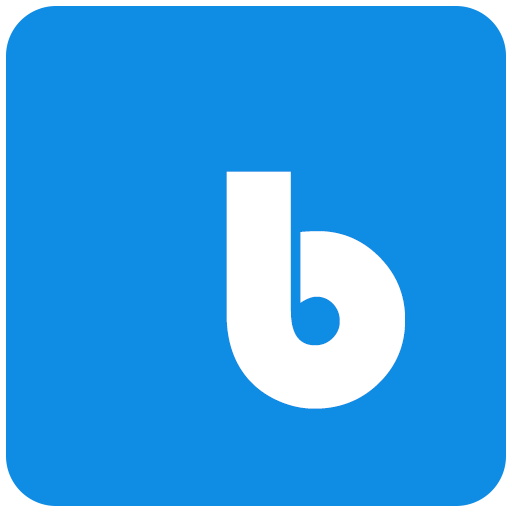
<style>
.page{position:relative;width:512px;height:512px;background:#0f8ce4}
.page>*{position:absolute;margin:0}
.t1{font:350px "Bauhaus93";color:#ffffff}
</style>
<div class="page">
<p class="t1" style="left:226px;top:171px;width:179px;height:238px">b</p>
</div>
